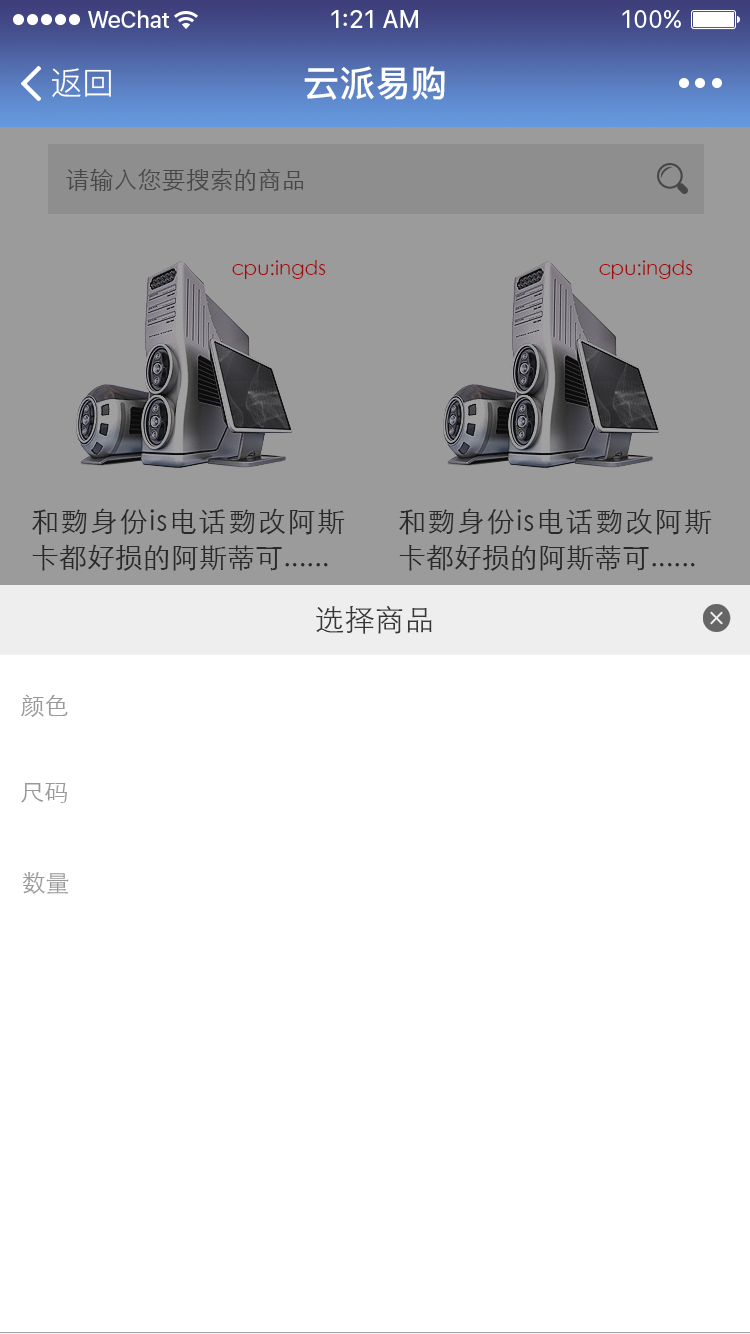
<style>
.page{position:relative;width:750px;height:1334px;background:#ffffff}
.page>*{position:absolute;margin:0}
.t1{font:32px "PingFang-SC-Regular";color:#ffffff}
.t2{font:36px "PingFang-SC-Bold";color:#ffffff}
.t3{font:24px "STXihei";color:#474747}
.t4{font:20px "STXihei";color:#a10b0b}
.t5{font:28px/36px "STXihei";color:#333333}
.t6{font:30px "STXihei";color:#373737}
.t7{font:24px "STXihei";color:#999999}
</style>
<div class="page">
<p class="t1" style="left:52px;top:68px;width:59px;height:29px">返回</p>
<p class="t2" style="left:304px;top:66px;width:141px;height:34px">云派易购</p>
<p class="t3" style="left:66px;top:168px;width:238px;height:23px">请输入您要搜索的商品</p>
<p class="t4" style="left:232px;top:260px;width:94px;height:19px">cpu:ingds</p>
<p class="t4" style="left:599px;top:260px;width:94px;height:19px">cpu:ingds</p>
<p class="t5" style="left:32px;top:508px;width:313px;height:63px;text-align:justify">和覅身份is电话覅改阿斯卡都好损的阿斯蒂可......</p>
<p class="t5" style="left:399px;top:508px;width:313px;height:63px;text-align:justify">和覅身份is电话覅改阿斯卡都好损的阿斯蒂可......</p>
<p class="t6" style="left:316px;top:605px;width:116px;height:29px">选择商品</p>
<p class="t7" style="left:21px;top:694px;width:47px;height:23px">颜色</p>
<p class="t7" style="left:21px;top:783px;width:46px;height:20px">尺码</p>
<p class="t7" style="left:22px;top:872px;width:47px;height:22px">数量</p>
</div>
